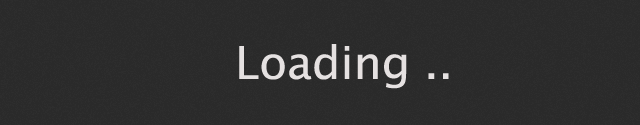
<style>
.page{position:relative;width:640px;height:125px;background:#2a2a2a}
.page>*{position:absolute;margin:0}
.t1{font:45.3px "LucidaSans";color:#e5e1e1}
</style>
<div class="page">
<p class="t1" style="left:239px;top:44px;width:210px;height:45px">Loading ..</p>
</div>
